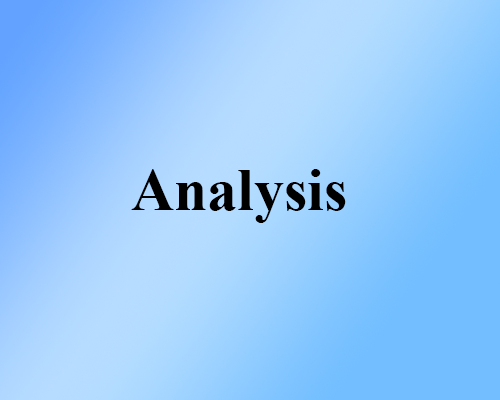
<style>
.page{position:relative;width:500px;height:400px}
.page>*{position:absolute;margin:0}
.t1{font:60px "TimesNewRomanPS-BoldMT";color:#000000}
</style>
<div class="page">
<p class="t1" style="left:131px;top:169px;width:215px;height:54px">Analysis</p>
</div>
